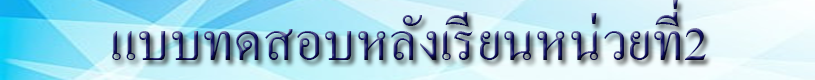
<style>
.page{position:relative;width:815px;height:80px}
.page>*{position:absolute;margin:0}
.t1{font:72px "AngsanaNew"}
</style>
<div class="page">
<p class="t1" style="left:112px;top:0px;width:594px;height:60px">แบบทดสอบหลังเรียนหน่วยที่2</p>
</div>
